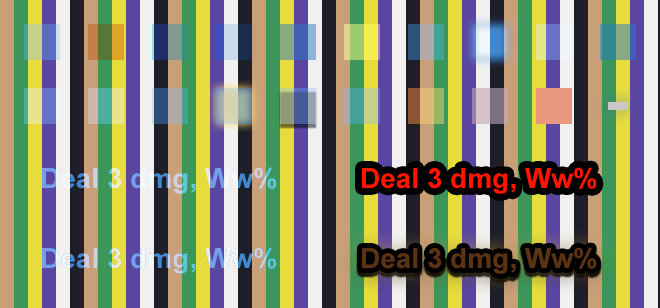
<style>
.page{position:relative;width:660px;height:308px}
.page>*{position:absolute;margin:0}
.t1{font:28px "Arial-BoldMT"}
.t2{font:28px "Arial-BoldMT";color:#ff0a00}
.t3{font:28px "Arial-BoldMT";color:#5a3214}
</style>
<div class="page">
<p class="t1" style="left:42px;top:167px;width:235px;height:27px">Deal 3 dmg, Ww%</p>
<p class="t2" style="left:362px;top:167px;width:235px;height:27px">Deal 3 dmg, Ww%</p>
<p class="t3" style="left:362px;top:247px;width:235px;height:27px">Deal 3 dmg, Ww%</p>
</div>
